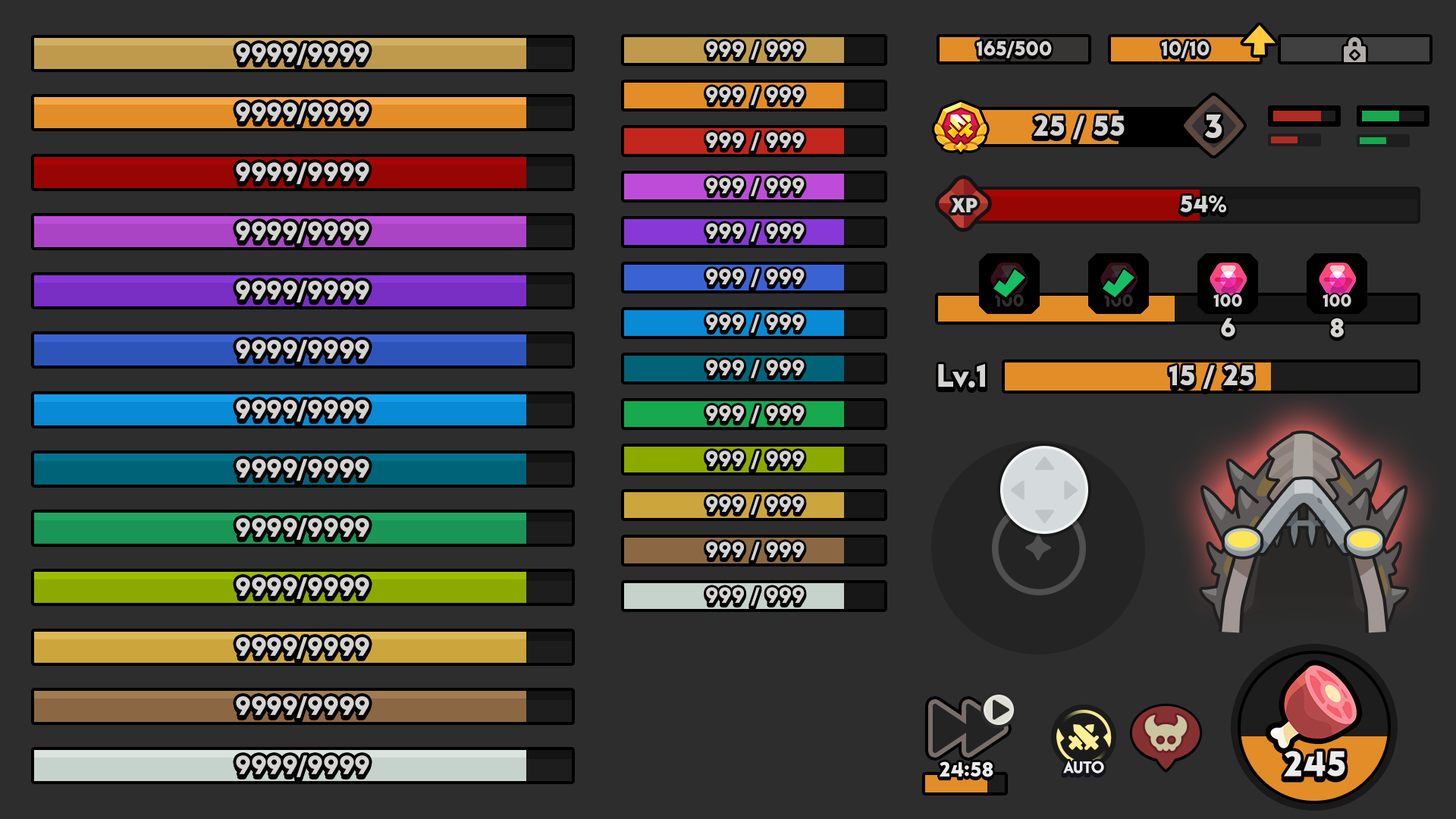
<style>
.page{position:relative;width:1456px;height:819px;background:#2d2d2d}
.page>*{position:absolute;margin:0}
.t1{font:22.7px "LTAvocado-Bold";color:#d6d4d3}
.t2{font:21.2px "LTAvocado-Bold";color:#d6d4d3}
.t3{font:27.3px "LTAvocado-Bold";color:#d6d4d3}
.t4{font:29.6px "LTAvocado-Bold";color:#d6d4d3;text-transform:uppercase}
.t5{font:34.9px "LTAvocado-Bold";color:#d6d4d3;text-transform:uppercase}
.t6{font:22.7px "AfacadFlux-ExtraBold";color:#d6d4d3;text-transform:uppercase}
.t7{font:24.3px "LTAvocado-Bold";color:#d6d4d3;text-transform:uppercase}
.t8{font:18.2px "LTAvocado-Bold";color:#2f2f2e}
.t9{font:18.2px "LTAvocado-Bold";color:#d6d4d3}
.t10{font:33.4px "LTAvocado-Bold";color:#d6d4d3}
.t11{font:21.2px "LTAvocado-Bold";color:#ececec}
.t12{font:18.2px "AfacadFlux-Bold";letter-spacing:-0.01em;color:#ececec;text-transform:uppercase}
.t13{font:36.4px "LTAvocado-Bold";color:#ececec}
</style>
<div class="page">
<p class="t1" style="left:706px;top:41px;width:99px;height:19px">999 / 999</p>
<p class="t2" style="left:977px;top:41px;width:75px;height:17px">165/500</p>
<p class="t2" style="left:1162px;top:41px;width:48px;height:17px">10/10</p>
<p class="t3" style="left:236px;top:43px;width:133px;height:22px">9999/9999</p>
<p class="t1" style="left:706px;top:86px;width:99px;height:19px">999 / 999</p>
<p class="t3" style="left:236px;top:102px;width:133px;height:22px">9999/9999</p>
<p class="t4" style="left:1034px;top:115px;width:91px;height:25px">25 / 55</p>
<p class="t5" style="left:1205px;top:115px;width:17px;height:23px">3</p>
<p class="t1" style="left:706px;top:132px;width:99px;height:19px">999 / 999</p>
<p class="t3" style="left:236px;top:162px;width:133px;height:22px">9999/9999</p>
<p class="t1" style="left:706px;top:177px;width:99px;height:19px">999 / 999</p>
<p class="t6" style="left:951px;top:198px;width:26px;height:14px">xp</p>
<p class="t7" style="left:1180px;top:195px;width:46px;height:17px">54%</p>
<p class="t3" style="left:236px;top:221px;width:133px;height:22px">9999/9999</p>
<p class="t1" style="left:706px;top:223px;width:99px;height:19px">999 / 999</p>
<p class="t1" style="left:706px;top:268px;width:99px;height:19px">999 / 999</p>
<p class="t3" style="left:236px;top:281px;width:133px;height:22px">9999/9999</p>
<p class="t8" style="left:995px;top:294px;width:29px;height:13px">100</p>
<p class="t8" style="left:1104px;top:294px;width:29px;height:13px">100</p>
<p class="t9" style="left:1213px;top:294px;width:29px;height:13px">100</p>
<p class="t9" style="left:1323px;top:294px;width:28px;height:13px">100</p>
<p class="t1" style="left:706px;top:314px;width:99px;height:19px">999 / 999</p>
<p class="t3" style="left:1221px;top:318px;width:14px;height:19px">6</p>
<p class="t3" style="left:1330px;top:318px;width:14px;height:19px">8</p>
<p class="t3" style="left:236px;top:340px;width:133px;height:22px">9999/9999</p>
<p class="t1" style="left:706px;top:359px;width:99px;height:19px">999 / 999</p>
<p class="t10" style="left:938px;top:364px;width:47px;height:24px">Lv.1</p>
<p class="t4" style="left:1169px;top:365px;width:85px;height:24px">15 / 25</p>
<p class="t3" style="left:236px;top:400px;width:133px;height:22px">9999/9999</p>
<p class="t1" style="left:706px;top:405px;width:99px;height:19px">999 / 999</p>
<p class="t3" style="left:236px;top:459px;width:133px;height:22px">9999/9999</p>
<p class="t1" style="left:706px;top:450px;width:99px;height:19px">999 / 999</p>
<p class="t1" style="left:706px;top:496px;width:99px;height:19px">999 / 999</p>
<p class="t3" style="left:236px;top:518px;width:133px;height:22px">9999/9999</p>
<p class="t1" style="left:706px;top:541px;width:99px;height:19px">999 / 999</p>
<p class="t3" style="left:236px;top:577px;width:133px;height:22px">9999/9999</p>
<p class="t1" style="left:706px;top:587px;width:99px;height:19px">999 / 999</p>
<p class="t3" style="left:236px;top:637px;width:133px;height:22px">9999/9999</p>
<p class="t3" style="left:236px;top:696px;width:133px;height:22px">9999/9999</p>
<p class="t3" style="left:236px;top:755px;width:133px;height:22px">9999/9999</p>
<p class="t11" style="left:939px;top:761px;width:54px;height:16px">24:58</p>
<p class="t12" style="left:1063px;top:761px;width:41px;height:12px">Auto</p>
<p class="t13" style="left:1284px;top:751px;width:61px;height:26px">245</p>
</div>
